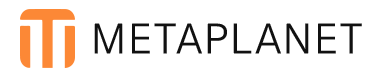
<style>
.page{position:relative;width:376px;height:74px;background:#ffffff}
.page>*{position:absolute;margin:0}
.t1{font:40px "KoPubWorldDotumMedium";letter-spacing:0.05em;color:#111111}
</style>
<div class="page">
<p class="t1" style="left:94px;top:23px;width:268px;height:31px">METAPLANET</p>
</div>
